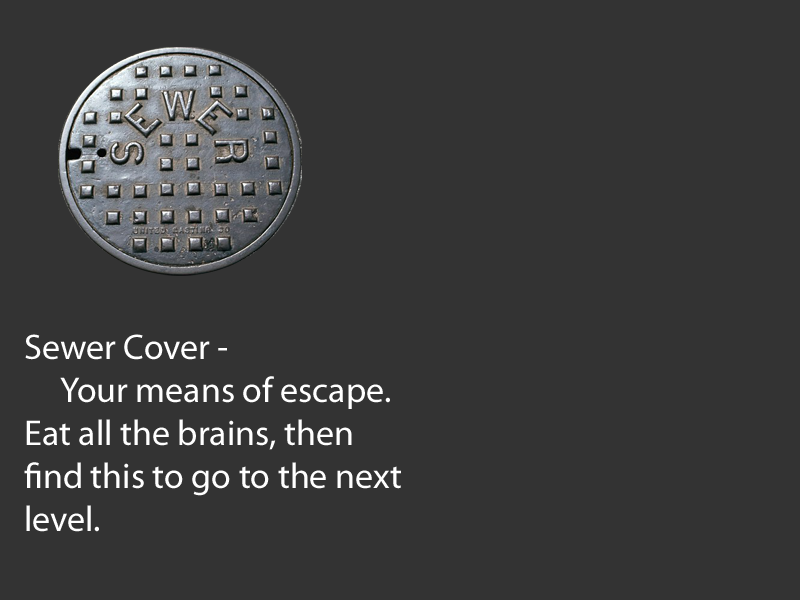
<style>
.page{position:relative;width:800px;height:600px;background:#333333}
.page>*{position:absolute;margin:0}
.t1{font:35.9px "MyriadPro-Regular";color:#ffffff}
</style>
<div class="page">
<p class="t1" style="left:24px;top:334px;width:377px;height:198px">Sewer Cover -<br> Your means of escape. <br>Eat all the brains, then <br>find this to go to the next<br>level.</p>
</div>
